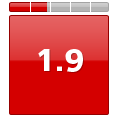
<style>
.page{position:relative;width:117px;height:117px;background:#d40000}
.page>*{position:absolute;margin:0}
.t1{font:36px "Colaborate-Bold";color:#ffffff;text-transform:uppercase}
</style>
<div class="page">
<p class="t1" style="left:38px;top:49px;width:45px;height:23px">1.9</p>
</div>
